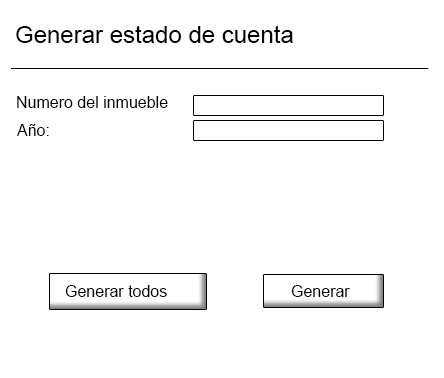
<style>
.page{position:relative;width:444px;height:378px;background:#ffffff}
.page>*{position:absolute;margin:0}
.t1{font:24px "ArialMT";color:#000000}
.t2{font:16px "ArialMT";color:#000000}
.t3{font:12px "ArialMT";color:#000000}
</style>
<div class="page">
<p class="t1" style="left:16px;top:25px;width:277px;height:18px">Generar estado de cuenta</p>
<p class="t2" style="left:17px;top:96px;width:151px;height:12px">Numero del inmueble</p>
<p class="t3" style="left:17px;top:124px;width:32px;height:12px">Año:</p>
<p class="t2" style="left:65px;top:285px;width:102px;height:12px">Generar todos</p>
<p class="t3" style="left:291px;top:285px;width:59px;height:12px">Generar</p>
</div>
